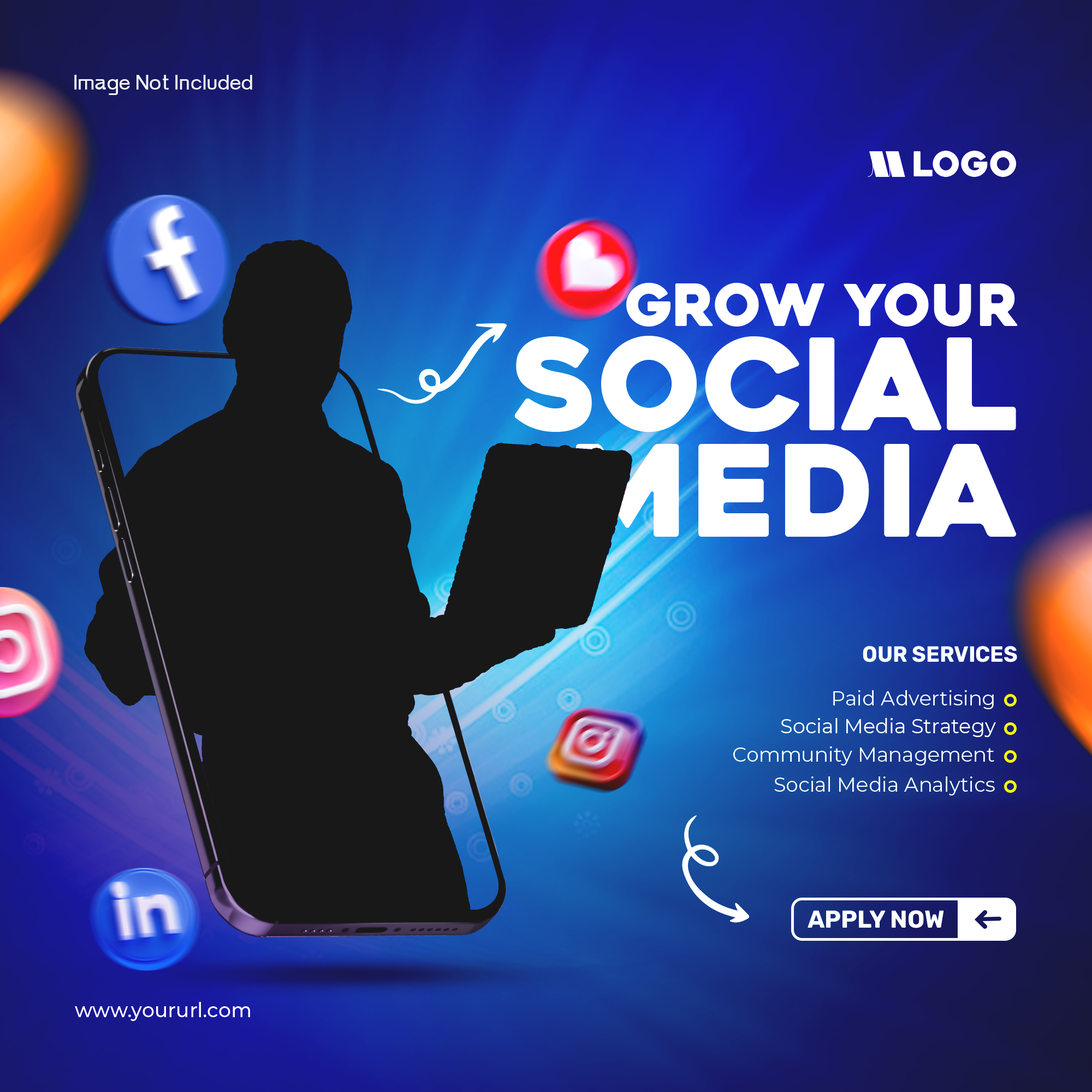
<style>
.page{position:relative;width:1092px;height:1092px}
.page>*{position:absolute;margin:0}
.t1{font:57.8px "Heavitas";color:#ffffff}
.t2{font:126.4px "Heavitas";color:#ffffff}
.t3{font:22.1px "Rubik-Bold";color:#ffffff;scale:0.96 1}
.t4{font:19.9px "Montserrat-Regular";color:#ffffff}
.t5{font:20.1px "Montserrat-Regular";color:#ffffff}
.t6{font:24.4px "Rubik-Bold";color:#ffffff}
.t7{font:20.1px "Montserrat-Medium";color:#ffffff}
</style>
<div class="page">
<p class="t1" style="left:626px;top:283px;width:392px;height:44px">Grow your</p>
<p class="t2" style="left:514px;top:336px;width:502px;height:96px">Social</p>
<p class="t2" style="left:576px;top:444px;width:441px;height:93px">Media</p>
<p class="t3" style="left:863px;top:646px;width:154px;height:16px">OUR SERVICES</p>
<p class="t4" style="left:833px;top:690px;width:161px;height:19px">Paid Advertising</p>
<p class="t5" style="left:781px;top:718px;width:215px;height:19px">Social Media Strategy</p>
<p class="t5" style="left:733px;top:746px;width:261px;height:19px">Community Management</p>
<p class="t5" style="left:774px;top:776px;width:221px;height:20px">Social Media Analytics</p>
<p class="t6" style="left:808px;top:910px;width:136px;height:18px">APPLY NOW</p>
<p class="t7" style="left:75px;top:1002px;width:175px;height:19px">www.yoururl.com</p>
</div>
